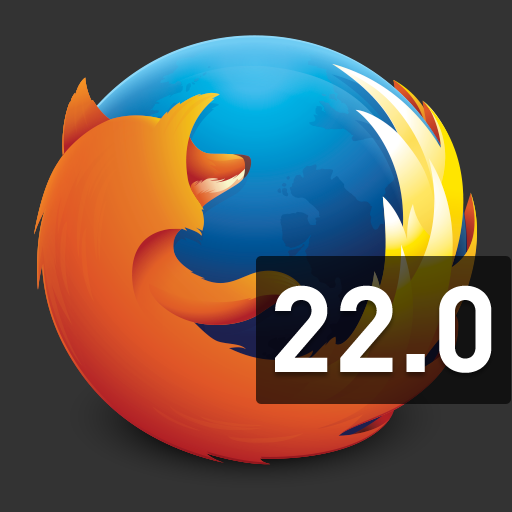
<style>
.page{position:relative;width:512px;height:512px;background:#333333}
.page>*{position:absolute;margin:0}
.t1{font:120px "DIN-Bold";color:#ffffff}
</style>
<div class="page">
<p class="t1" style="left:275px;top:285px;width:217px;height:88px">22.0</p>
</div>
